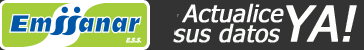
<style>
.page{position:relative;width:364px;height:50px;background:#333333}
.page>*{position:absolute;margin:0}
.t1{font:24px "Tahoma-FauxItalic";color:#fcfdfc;font-weight:bold}
.t2{font:49px "Tahoma-FauxItalic";color:#fefffd;font-weight:bold}
.t3{font:24px "Tahoma-FauxItalic";color:#f8fbf7;font-weight:bold}
</style>
<div class="page">
<p class="t1" style="left:182px;top:3px;width:102px;height:20px">Actualice</p>
<p class="t2" style="left:286px;top:5px;width:71px;height:37px">YA!</p>
<p class="t3" style="left:173px;top:23px;width:107px;height:20px">sus datos</p>
</div>
